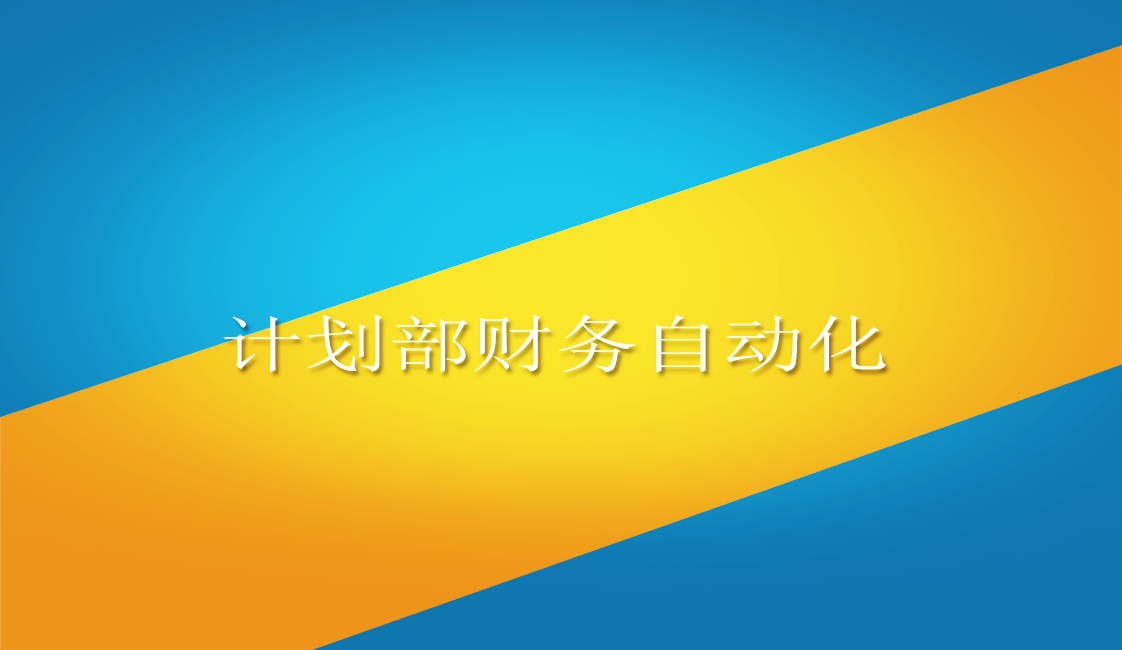
<style>
.page{position:relative;width:1122px;height:650px}
.page>*{position:absolute;margin:0}
.t1{font:62.5px "SimSun";color:#fefefe;scale:1.34 1}
</style>
<div class="page">
<p class="t1" style="left:223px;top:314px;width:663px;height:59px">计划部财务自动化</p>
</div>
